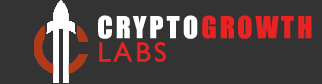
<style>
.page{position:relative;width:322px;height:84px;background:#333333}
.page>*{position:absolute;margin:0}
.t1{font:28px/23.3px "Impact";letter-spacing:0.1em;color:#ffffff}
.t2{font:28px/23.3px "Impact";letter-spacing:0.1em;color:#e72323}
.t3{font:28px/23.3px "GillSansMT";letter-spacing:0.1em;color:#e72323}
</style>
<div class="page">
<p class="t1" style="left:98px;top:15px;width:214px;height:47px">CRYPTO<span class="t2">GROWTH<br></span><span class="t3">LABS</span></p>
</div>
